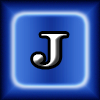
<style>
.page{position:relative;width:100px;height:100px}
.page>*{position:absolute;margin:0}
.t1{font:47.9px "EngraversMT";font-weight:bold;scale:1.05 1}
</style>
<div class="page">
<p class="t1" style="left:33px;top:34px;width:34px;height:33px">J</p>
</div>
